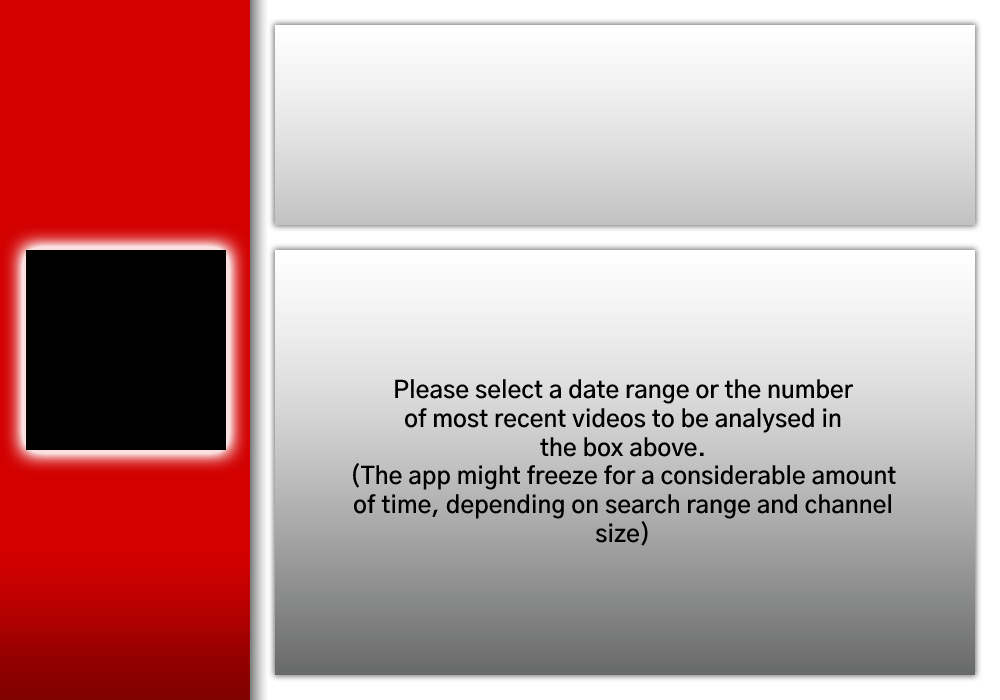
<style>
.page{position:relative;width:1000px;height:700px}
.page>*{position:absolute;margin:0}
.t1{font:24px "GothicA1-SemiBold";color:#000000}
</style>
<div class="page">
<p class="t1" style="left:353px;top:379px;width:543px;height:167px;text-align:center">Please select a date range or the number<br>of most recent videos to be analysed in<br>the box above.<br>(The app might freeze for a considerable amount<br>of time, depending on search range and channel<br>size)</p>
</div>
